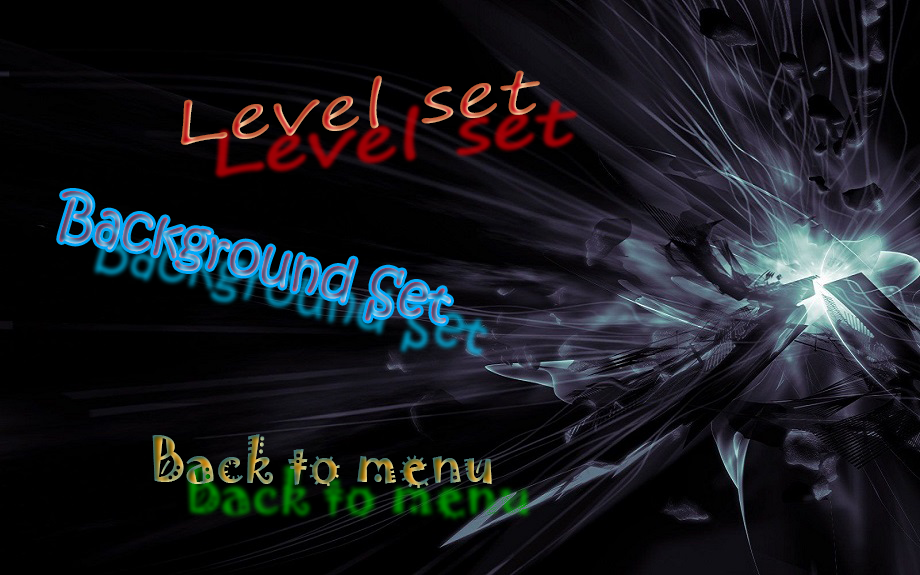
<style>
.page{position:relative;width:920px;height:575px;background:#000000}
.page>*{position:absolute;margin:0}
.t1{font:59.9px "SegoePrint";scale:1.41 1}
.t2{font:56.5px "KristenITC-Regular";scale:0.9 1}
.t3{font:55.1px "Jokerman-Regular"}
</style>
<div class="page">
<p class="t1" style="left:180px;top:70px;width:360px;height:75px;rotate:-5deg">Level set</p>
<p class="t2" style="left:59px;top:191px;width:392px;height:133px;rotate:13deg">Background Set</p>
<p class="t3" style="left:152px;top:434px;width:340px;height:54px">Back to menu</p>
</div>
